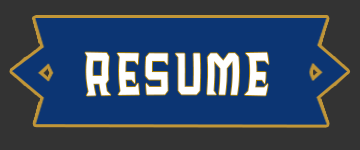
<style>
.page{position:relative;width:360px;height:150px;background:#0c3573}
.page>*{position:absolute;margin:0}
.t1{font:62.5px "Lorde-Havana";letter-spacing:0.1em;color:#ffffff;scale:0.75 1}
</style>
<div class="page">
<p class="t1" style="left:85px;top:52px;width:184px;height:44px">REsume</p>
</div>
